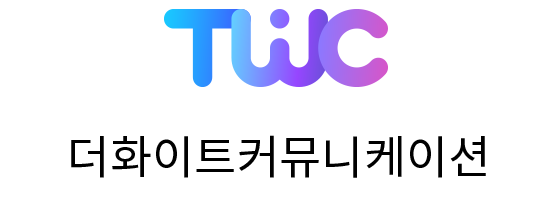
<style>
.page{position:relative;width:560px;height:200px;background:#ffffff}
.page>*{position:absolute;margin:0}
.t1{font:46px "NotoSansKR-Regular";color:#000000}
</style>
<div class="page">
<p class="t1" style="left:71px;top:135px;width:415px;height:43px">더화이트커뮤니케이션</p>
</div>
